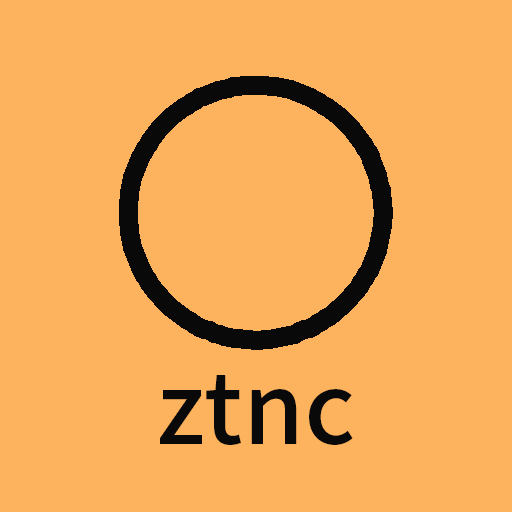
<style>
.page{position:relative;width:512px;height:512px;background:#fdb25d}
.page>*{position:absolute;margin:0}
.t1{font:98.4px "NotoSansCJKhk-Medium";color:#090909}
</style>
<div class="page">
<p class="t1" style="left:160px;top:375px;width:193px;height:70px">ztnc</p>
</div>
